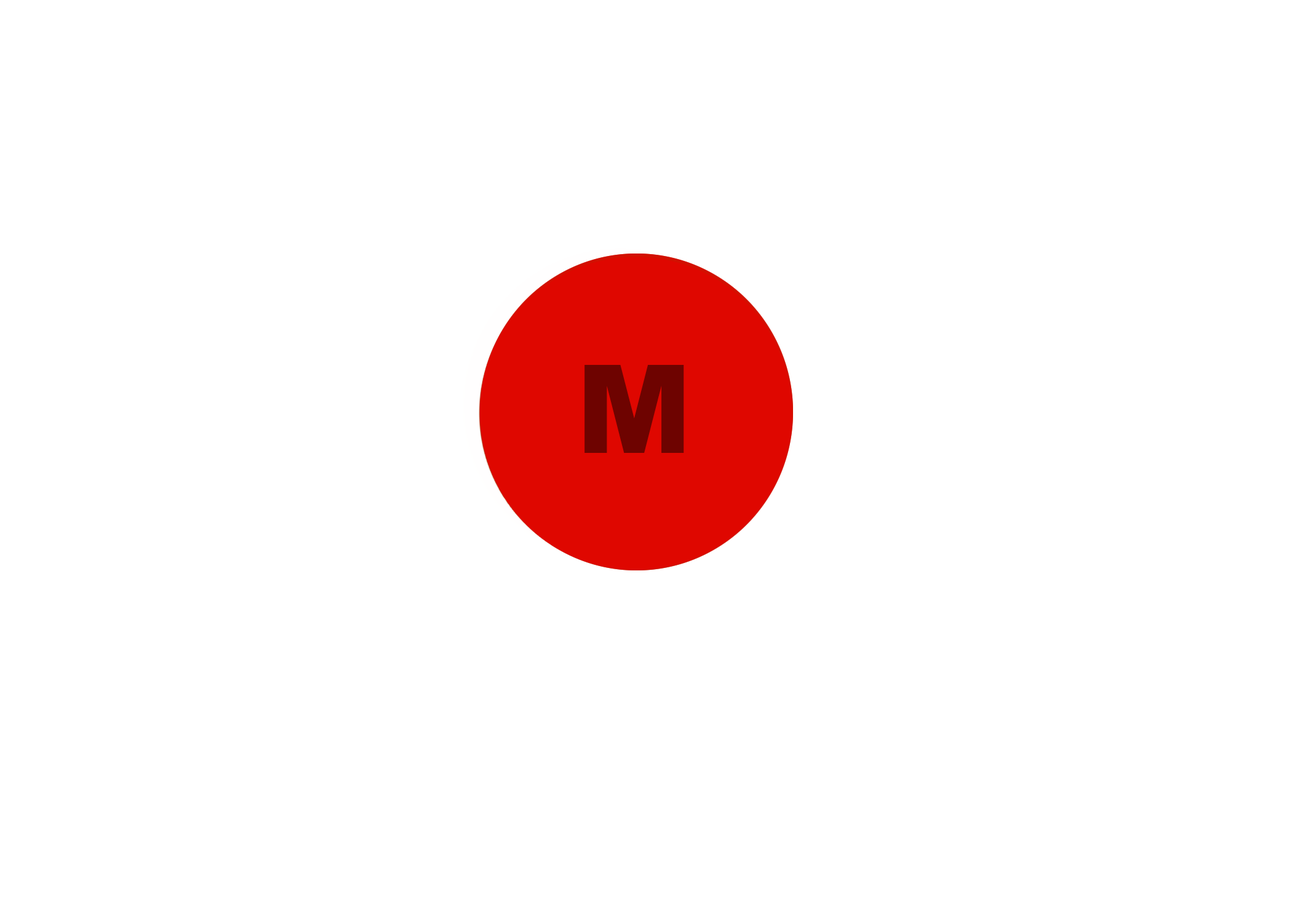
<style>
.page{position:relative;width:1292px;height:923px;background:#ffffff}
.page>*{position:absolute;margin:0}
.t1{font:123.1px "Arial-Black";color:#6e0300}
</style>
<div class="page">
<p class="t1" style="left:585px;top:365px;width:99px;height:88px">M</p>
</div>
